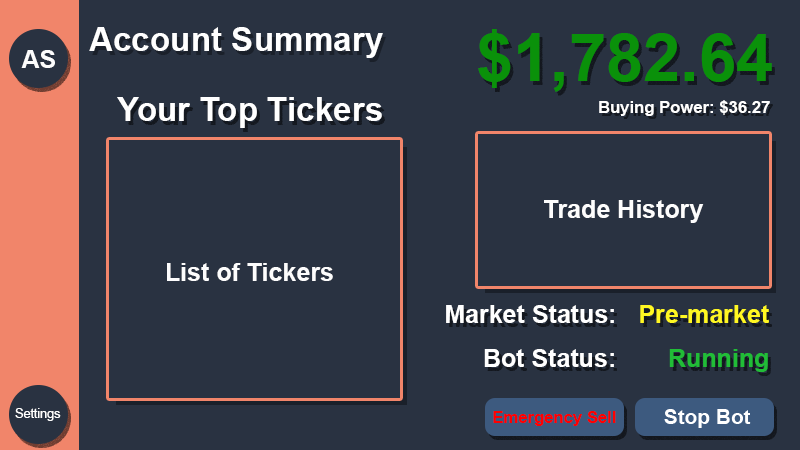
<style>
.page{position:relative;width:800px;height:450px;background:#293241}
.page>*{position:absolute;margin:0}
.t1{font:33.3px "Arial-BoldMT";color:#ffffff}
.t2{font:66.7px "Arial-BoldMT";color:#0a910a}
.t3{font:25px "Arial-BoldMT";color:#fefefe}
.t4{font:16.7px "Arial-BoldMT";color:#ffffff}
.t5{font:25px "Arial-BoldMT";color:#ffffff}
.t6{font:25px "Arial-BoldMT";color:#fff722}
.t7{font:25px "Arial-BoldMT";color:#21bd37}
.t8{font:12.5px "ArialMT";color:#ffffff}
.t9{font:16.7px "Arial-BoldMT";color:#ff0000}
</style>
<div class="page">
<p class="t1" style="left:89px;top:27px;width:294px;height:31px">Account Summary</p>
<p class="t2" style="left:478px;top:29px;width:294px;height:63px">$1,782.64</p>
<p class="t3" style="left:21px;top:50px;width:34px;height:18px">AS</p>
<p class="t1" style="left:117px;top:97px;width:265px;height:31px">Your Top Tickers</p>
<p class="t4" style="left:599px;top:100px;width:171px;height:16px">Buying Power: $36.27</p>
<p class="t3" style="left:544px;top:200px;width:160px;height:23px">Trade History</p>
<p class="t3" style="left:167px;top:263px;width:166px;height:18px">List of Tickers</p>
<p class="t5" style="left:446px;top:305px;width:168px;height:18px">Market Status:</p>
<p class="t6" style="left:640px;top:305px;width:129px;height:18px">Pre-market</p>
<p class="t5" style="left:484px;top:349px;width:130px;height:18px">Bot Status:</p>
<p class="t7" style="left:669px;top:349px;width:99px;height:23px">Running</p>
<p class="t8" style="left:15px;top:408px;width:46px;height:13px">Settings</p>
<p class="t9" style="left:493px;top:411px;width:123px;height:15px">Emergency Sell</p>
</div>
